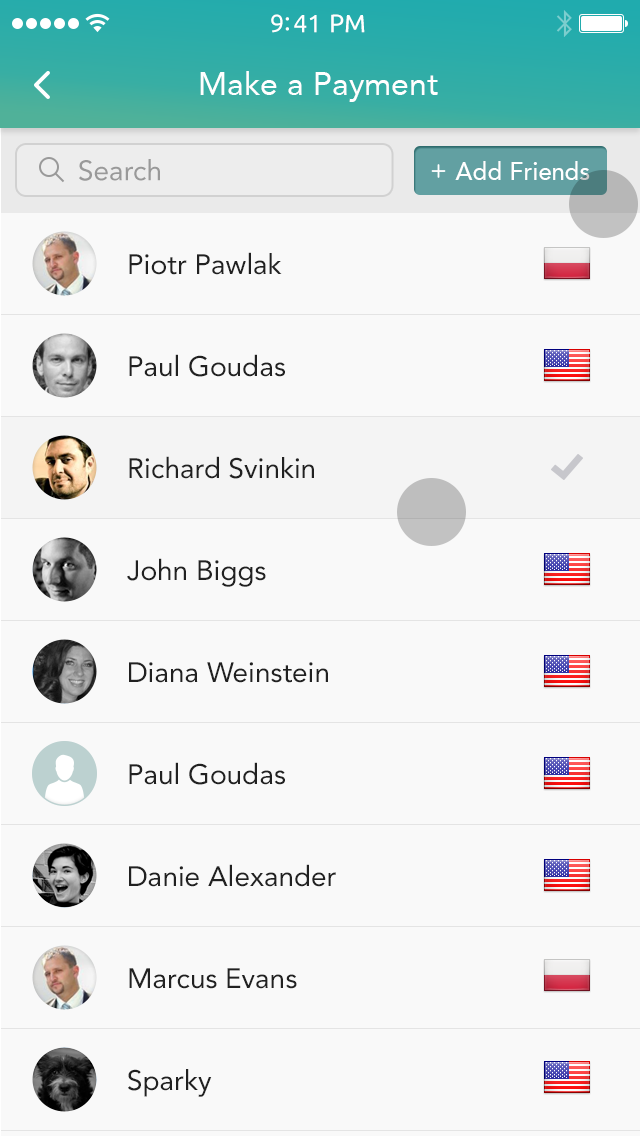
<style>
.page{position:relative;width:640px;height:1136px;background:#f9f9f9}
.page>*{position:absolute;margin:0}
.t1{font:25px "Ubuntu";color:#ffffff}
.t2{font:32px "Avenir-Roman";color:#ffffff}
.t3{font:28px "Avenir-Roman";color:#999999}
.t4{font:24px "Avenir-Medium";color:#ffffff}
.t5{font:28px "Avenir-Roman";color:#212121}
</style>
<div class="page">
<p class="t1" style="left:271px;top:14px;width:94px;height:19px">9:41 PM</p>
<p class="t2" style="left:200px;top:71px;width:238px;height:31px">Make a Payment</p>
<p class="t3" style="left:79px;top:159px;width:81px;height:22px">Search</p>
<p class="t4" style="left:455px;top:161px;width:135px;height:19px">Add Friends</p>
<p class="t5" style="left:129px;top:252px;width:153px;height:23px">Piotr Pawlak</p>
<p class="t5" style="left:129px;top:354px;width:156px;height:23px">Paul Goudas</p>
<p class="t5" style="left:129px;top:456px;width:185px;height:23px">Richard Svinkin</p>
<p class="t5" style="left:129px;top:456px;width:185px;height:23px">Richard Svinkin</p>
<p class="t5" style="left:127px;top:558px;width:139px;height:29px">John Biggs</p>
<p class="t5" style="left:129px;top:662px;width:199px;height:21px">Diana Weinstein</p>
<p class="t5" style="left:129px;top:762px;width:156px;height:23px">Paul Goudas</p>
<p class="t5" style="left:129px;top:864px;width:207px;height:23px">Danie Alexander</p>
<p class="t5" style="left:129px;top:968px;width:168px;height:21px">Marcus Evans</p>
<p class="t5" style="left:128px;top:1069px;width:84px;height:28px">Sparky</p>
</div>
